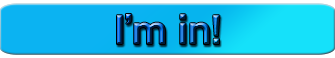
<style>
.page{position:relative;width:335px;height:58px;background:#0bb3f2}
.page>*{position:absolute;margin:0}
.t1{font:36px "KeepCalm-Medium"}
</style>
<div class="page">
<p class="t1" style="left:117px;top:14px;width:103px;height:30px">I’m in!</p>
</div>
